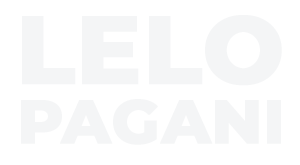
<style>
.page{position:relative;width:300px;height:165px;background:#ffffff}
.page>*{position:absolute;margin:0}
.t1{font:95.3px "Montserrat-ExtraBold";color:#f4f5f6;font-weight:bold}
.t2{font:62.1px "Montserrat-ExtraBold";color:#f4f5f6;font-weight:bold}
</style>
<div class="page">
<p class="t1" style="left:22px;top:15px;width:260px;height:71px">LELO</p>
<p class="t2" style="left:21px;top:99px;width:260px;height:46px">PAGANI</p>
</div>
